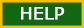
<style>
.page{position:relative;width:84px;height:28px;background:#116712}
.page>*{position:absolute;margin:0}
.t1{font:17px "Verdana";color:#ffffff;font-weight:bold}
</style>
<div class="page">
<p class="t1" style="left:21px;top:7px;width:44px;height:13px">HELP</p>
</div>
